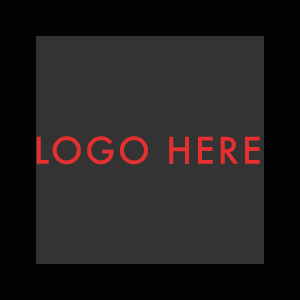
<style>
.page{position:relative;width:300px;height:300px;background:#333333}
.page>*{position:absolute;margin:0}
.t1{font:35.8px "Futura-Medium";letter-spacing:0.07em;color:#e63030}
</style>
<div class="page">
<p class="t1" style="left:36px;top:136px;width:224px;height:29px">LOGO HERE</p>
</div>
